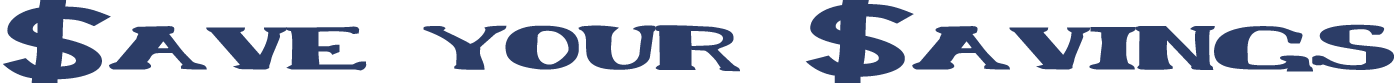
<style>
.page{position:relative;width:1400px;height:83px;background:#ffffff}
.page>*{position:absolute;margin:0}
.t1{font:73.6px "ChardinDoihleBold";letter-spacing:-0.075em;color:#2c3d67;scale:2.36 1}
</style>
<div class="page">
<p class="t1" style="left:109px;top:24px;width:1285px;height:48px">ave your   avings</p>
</div>
